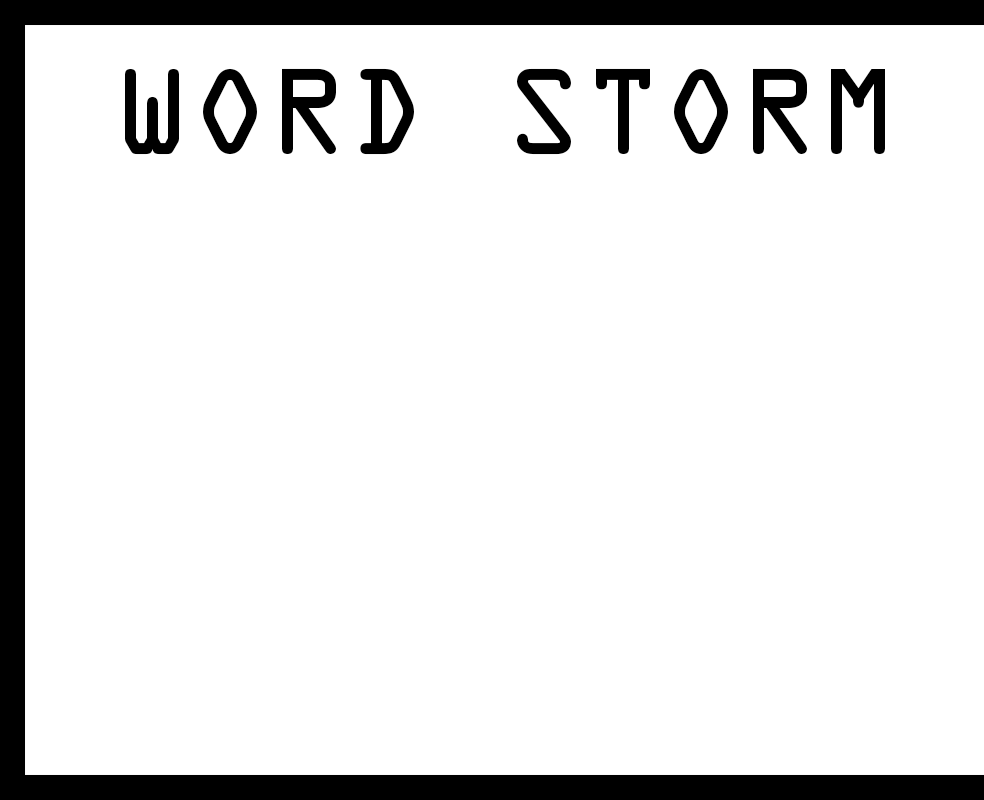
<style>
.page{position:relative;width:984px;height:800px;background:#ffffff}
.page>*{position:absolute;margin:0}
.t1{font:109px "OCRAStd";color:#000000}
</style>
<div class="page">
<p class="t1" style="left:125px;top:68px;width:760px;height:87px">WORD STORM</p>
</div>
